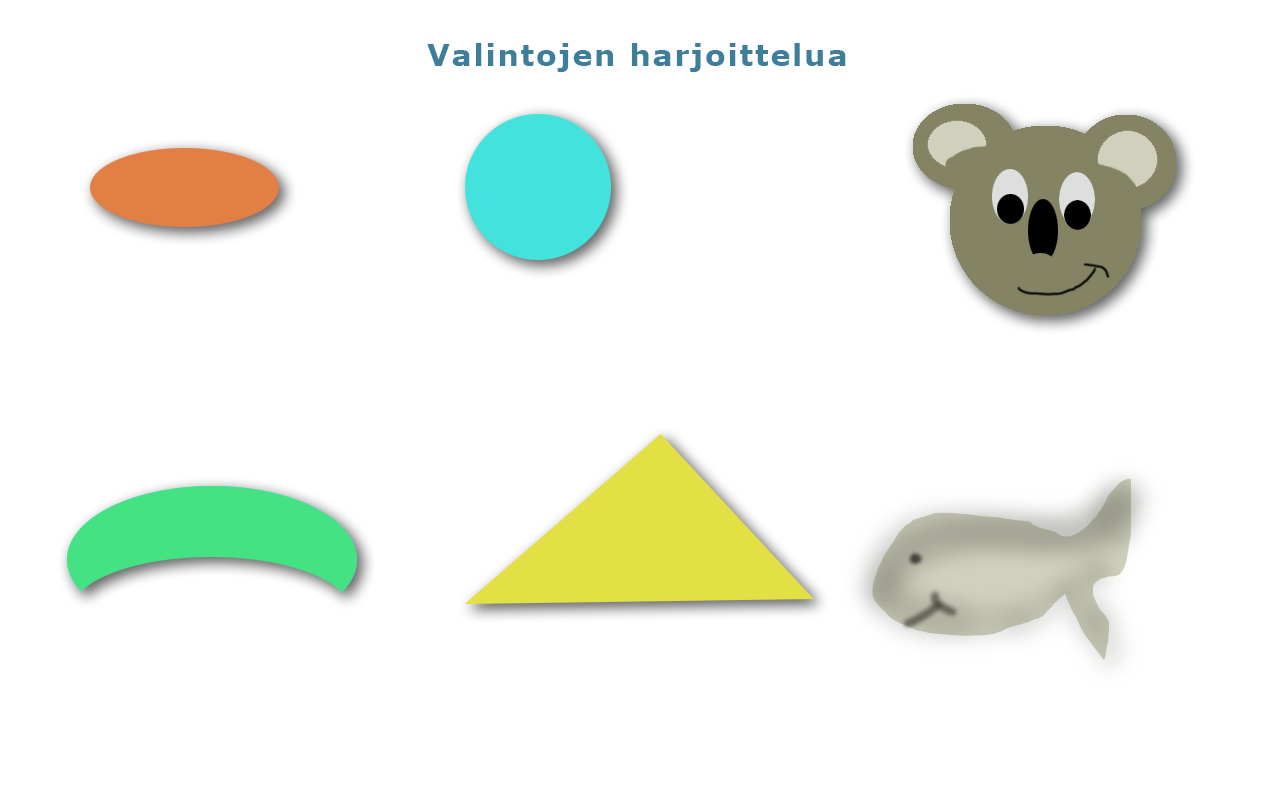
<style>
.page{position:relative;width:1280px;height:800px;background:#ffffff}
.page>*{position:absolute;margin:0}
.t1{font:30px "Verdana-Bold";letter-spacing:0.06em;color:#3d7f9a}
</style>
<div class="page">
<p class="t1" style="left:427px;top:43px;width:419px;height:29px">Valintojen harjoittelua</p>
</div>
